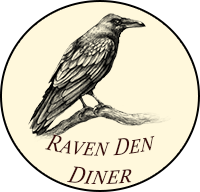
<style>
.page{position:relative;width:200px;height:192px;background:#fff8dc}
.page>*{position:absolute;margin:0}
.t1{font:26px/28.4px "SitkaDisplay-Italic";color:#3b0c0c;font-variant:small-caps;font-weight:bold;font-style:italic;scale:0.82 1}
</style>
<div class="page">
<p class="t1" style="left:45px;top:134px;width:110px;height:51px;text-align:center">Raven Den <br>Diner</p>
</div>
